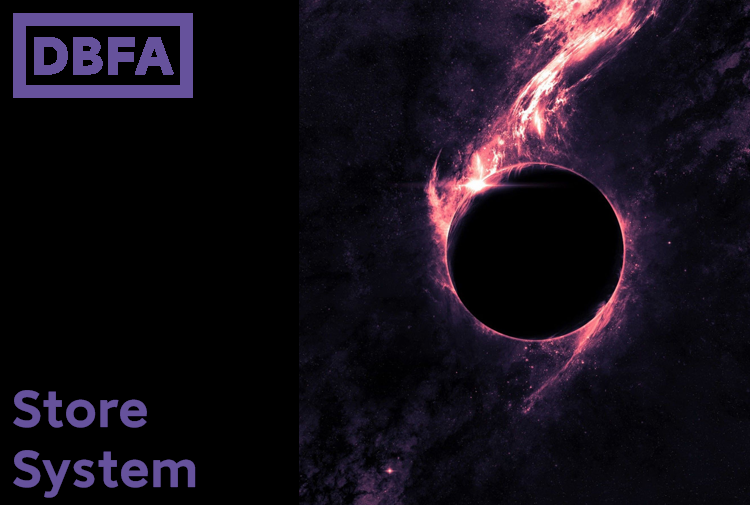
<style>
.page{position:relative;width:750px;height:505px;background:#000000}
.page>*{position:absolute;margin:0}
.t1{font:50px "MILanProVF-SemiBold";color:#66529c}
</style>
<div class="page">
<p class="t1" style="left:13px;top:390px;width:183px;height:108px">Store<br>System</p>
</div>
